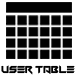
<style>
.page{position:relative;width:78px;height:78px;background:#020202}
.page>*{position:absolute;margin:0}
.t1{font:9px "VerminVibesV";color:#020202}
</style>
<div class="page">
<p class="t1" style="left:1px;top:65px;width:74px;height:10px">USER TABLE</p>
</div>
